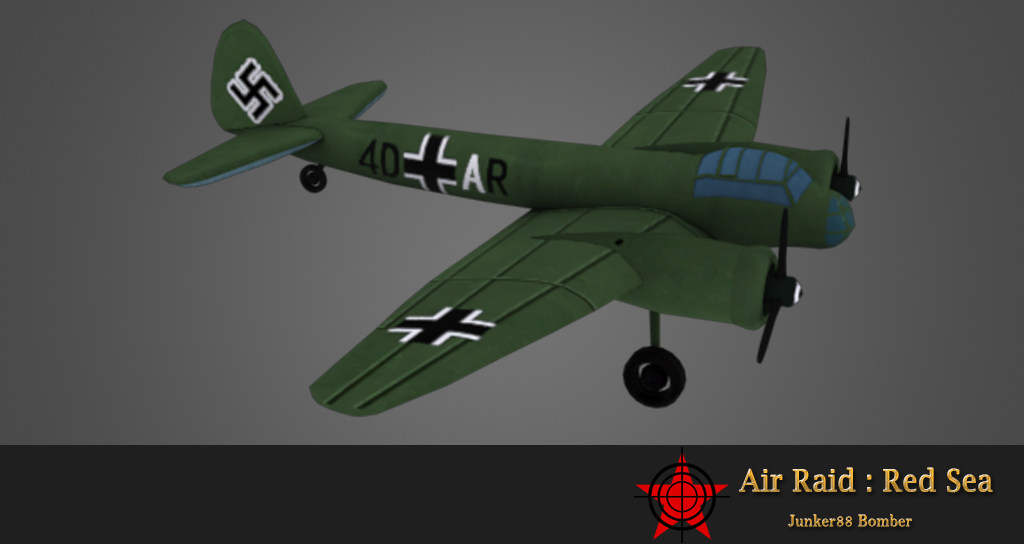
<style>
.page{position:relative;width:1024px;height:544px}
.page>*{position:absolute;margin:0}
.t1{font:30px "LucidaBright";font-weight:bold;scale:0.93 1}
.t2{font:17.5px "BellMT";font-weight:bold;scale:0.93 1}
</style>
<div class="page">
<p class="t1" style="left:739px;top:467px;width:254px;height:26px">Air Raid : Red Sea</p>
<p class="t2" style="left:788px;top:514px;width:125px;height:13px">Junker88 Bomber</p>
</div>
